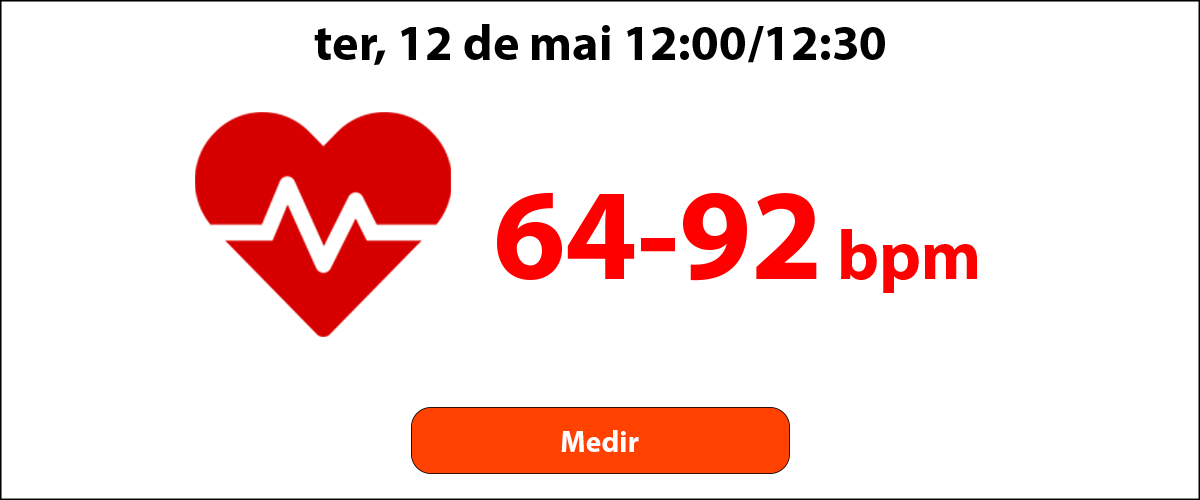
<style>
.page{position:relative;width:1200px;height:500px;background:#ffffff}
.page>*{position:absolute;margin:0}
.t1{font:50px "MyriadPro-Bold";color:#000000}
.t2{font:130px "MyriadPro-Bold";color:#ff0000}
.t3{font:70px "MyriadPro-Bold";color:#ff0000}
.t4{font:30px "MyriadPro-Bold";color:#ffffff}
</style>
<div class="page">
<p class="t1" style="left:314px;top:24px;width:571px;height:41px">ter, 12 de mai 12:00/12:30</p>
<p class="t2" style="left:497px;top:192px;width:320px;height:89px">64-92</p>
<p class="t3" style="left:841px;top:229px;width:136px;height:64px">bpm</p>
<p class="t4" style="left:561px;top:430px;width:78px;height:22px">Medir</p>
</div>
